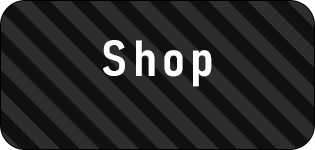
<style>
.page{position:relative;width:315px;height:150px;background:#2d2d2d}
.page>*{position:absolute;margin:0}
.t1{font:50px "Bahnschrift-SemiBoldSemiCondensed";letter-spacing:0.1em;color:#ffffff}
</style>
<div class="page">
<p class="t1" style="left:103px;top:40px;width:109px;height:47px">Shop</p>
</div>
